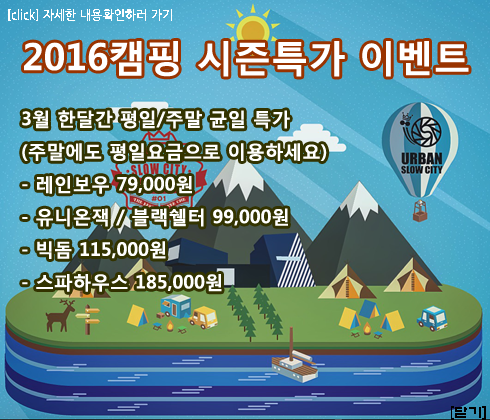
<style>
.page{position:relative;width:490px;height:420px}
.page>*{position:absolute;margin:0}
.t1{font:13.3px "NanumGothicBold";color:#ffffff;scale:0.9 1}
.t2{font:37.3px "MalgunGothicBold";color:#ffffff}
.t3{font:18.7px "MalgunGothicBold";color:#ffffff}
.t4{font:14px "ExpoB-HM";color:#000000}
</style>
<div class="page">
<p class="t1" style="left:8px;top:9px;width:164px;height:12px">[click] 자세한 내용확인하러 가기</p>
<p class="t2" style="left:24px;top:41px;width:445px;height:36px">2016캠핑 시즌특가 이벤트</p>
<p class="t3" style="left:22px;top:110px;width:305px;height:182px">3월 한달간 평일/주말 균일 특가<br>(주말에도 평일요금으로 이용하세요)<br>- 레인보우 79,000원<br>- 유니온잭 / 블랙쉘터 99,000원 <br>- 빅돔 115,000원<br>- 스파하우스 185,000원</p>
<p class="t4" style="left:451px;top:406px;width:35px;height:14px">[닫기]</p>
</div>
